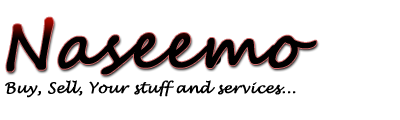
<style>
.page{position:relative;width:400px;height:120px;background:#ffffff}
.page>*{position:absolute;margin:0}
.t1{font:64px "SegoeScript";color:#000000;font-weight:bold}
.t2{font:14.7px "LucidaHandwriting-Italic";color:#000000;font-weight:bold}
</style>
<div class="page">
<p class="t1" style="left:6px;top:17px;width:311px;height:58px">Naseemo</p>
<p class="t2" style="left:5px;top:80px;width:291px;height:18px">Buy, Sell, Your stuff and services...</p>
</div>
